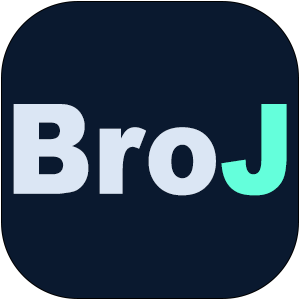
<style>
.page{position:relative;width:300px;height:300px;background:#0a192f}
.page>*{position:absolute;margin:0}
.t1{font:125px "Arial-Black";color:#dbe6f4;scale:0.9 1}
.t2{font:125px "Arial-Black";color:#64ffdb;scale:0.9 1}
</style>
<div class="page">
<p class="t1" style="left:13px;top:104px;width:274px;height:92px">Bro<span class="t2">J</span></p>
</div>
